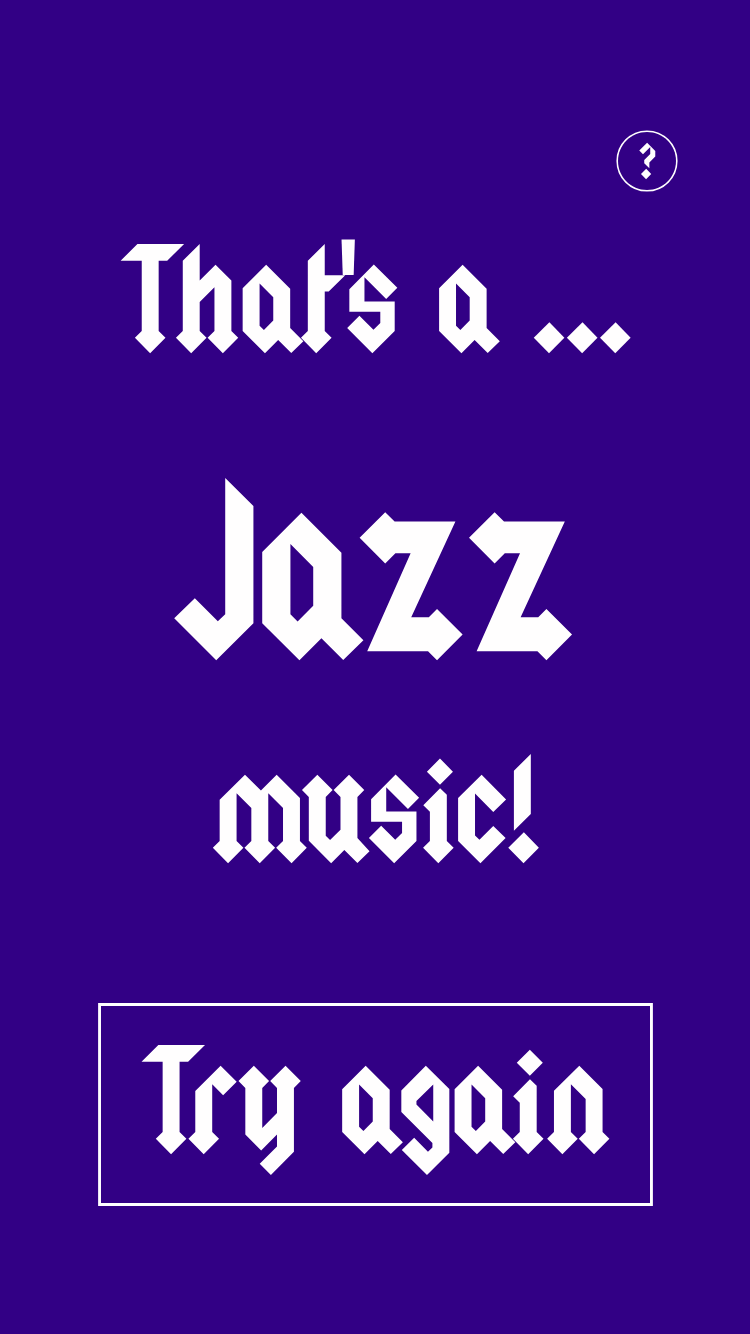
<style>
.page{position:relative;width:750px;height:1334px;background:#320085}
.page>*{position:absolute;margin:0}
.t1{font:40px "Squealer";color:#fffefe}
.t2{font:120px "Squealer";color:#fffefe}
.t3{font:200px "Squealer";color:#fffefe}
</style>
<div class="page">
<p class="t1" style="left:639px;top:142px;width:17px;height:38px">?</p>
<p class="t2" style="left:120px;top:239px;width:511px;height:115px">That's a ...</p>
<p class="t3" style="left:174px;top:477px;width:399px;height:184px">Jazz</p>
<p class="t2" style="left:212px;top:753px;width:327px;height:111px">music!</p>
<p class="t2" style="left:141px;top:1044px;width:469px;height:132px">Try again</p>
</div>
